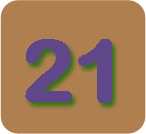
<style>
.page{position:relative;width:146px;height:134px;background:#b07f50}
.page>*{position:absolute;margin:0}
.t1{font:86.1px "ArialRoundedMTBold";letter-spacing:-0.01em;color:#604789;font-weight:bold}
</style>
<div class="page">
<p class="t1" style="left:25px;top:39px;width:87px;height:64px">21</p>
</div>
